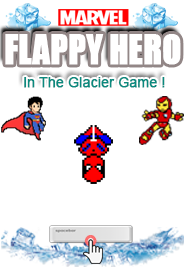
<style>
.page{position:relative;width:184px;height:267px;background:#ffffff}
.page>*{position:absolute;margin:0}
.t1{font:37.5px "Impact";letter-spacing:-0.005em;color:#ffffff;font-weight:bold;scale:0.9 1}
.t2{font:13.9px "ArialMT";letter-spacing:-0.005em;color:#0a8a7f;font-weight:bold}
</style>
<div class="page">
<p class="t1" style="left:5px;top:34px;width:176px;height:31px">FLAPPY HERO</p>
<p class="t2" style="left:24px;top:77px;width:141px;height:11px">In The Glacier Game !</p>
</div>
